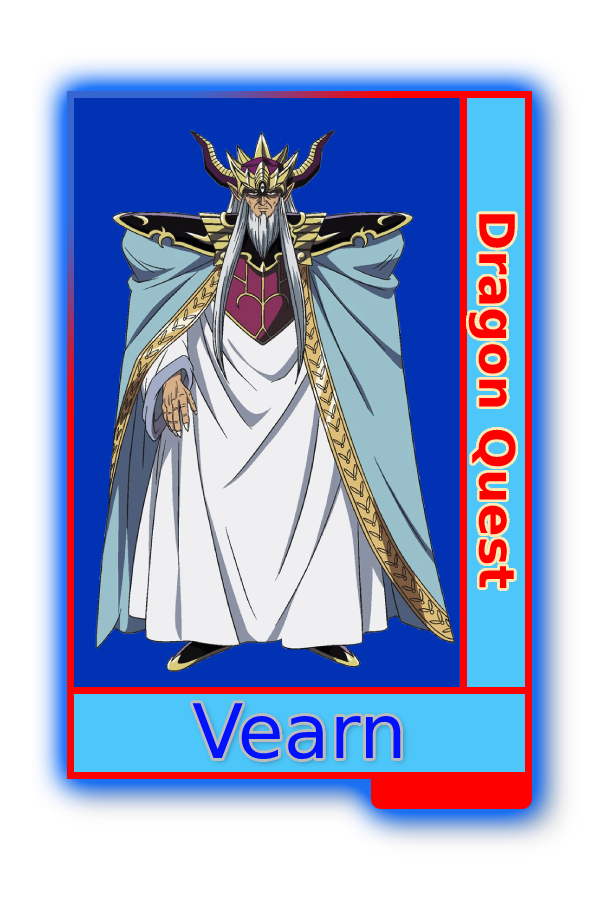
<style>
.page{position:relative;width:600px;height:900px;background:#ffffff}
.page>*{position:absolute;margin:0}
.t1{font:48.8px "MADETOMMY-Bold";color:#ff0000}
.t2{font:75px "CoolveticaRg-Regular";color:#0011fd}
</style>
<div class="page">
<p class="t1" style="left:468px;top:214px;width:48px;height:374px;rotate:90deg">Dragon Quest</p>
<p class="t2" style="left:192px;top:703px;width:209px;height:57px">Vearn</p>
</div>
